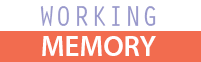
<style>
.page{position:relative;width:201px;height:62px;background:#ffffff}
.page>*{position:absolute;margin:0}
.t1{font:29px "OratorStd";color:#9999cc}
.t2{font:29px "MyriadPro-Semibold";color:#ffffff}
</style>
<div class="page">
<p class="t1" style="left:40px;top:6px;width:116px;height:20px">WORKING</p>
<p class="t2" style="left:42px;top:36px;width:114px;height:20px">MEMORY</p>
</div>
